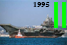
<style>
.page{position:relative;width:67px;height:45px}
.page>*{position:absolute;margin:0}
.t1{font:10.3px "Aparajita-Bold";color:#000000}
</style>
<div class="page">
<p class="t1" style="left:33px;top:2px;width:17px;height:5px">1995</p>
</div>
